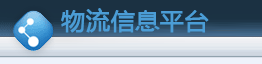
<style>
.page{position:relative;width:262px;height:64px}
.page>*{position:absolute;margin:0}
.t1{font:24px "MicrosoftYaHei";color:#4b9dd6;font-weight:bold}
</style>
<div class="page">
<p class="t1" style="left:61px;top:8px;width:148px;height:25px">物流信息平台</p>
</div>
